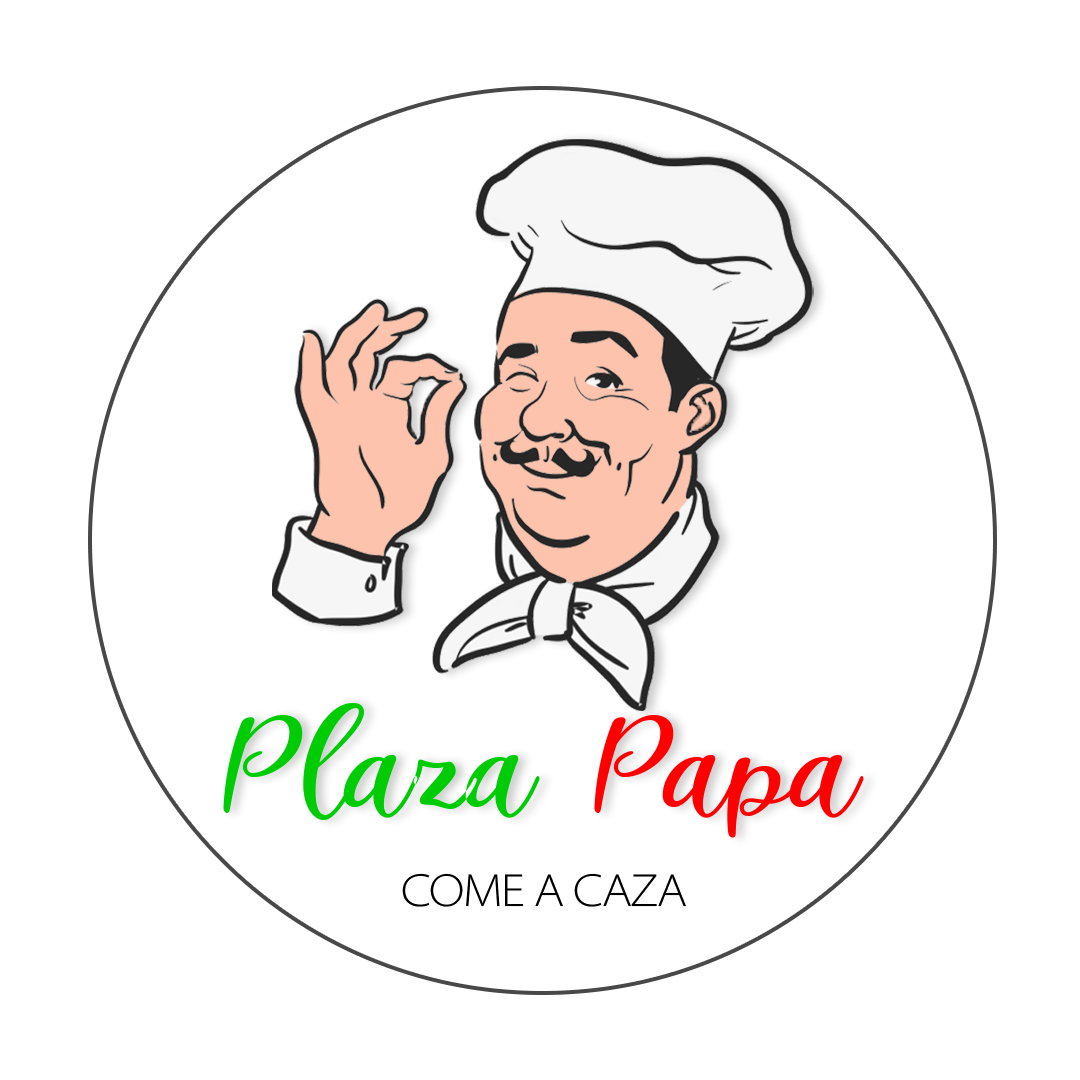
<style>
.page{position:relative;width:1080px;height:1080px;background:#ffffff}
.page>*{position:absolute;margin:0}
.t1{font:183.5px "ItalianBreakfast-Regular";color:#00cc05}
.t2{font:183.5px "ItalianBreakfast-Regular";color:#ff0000}
.t3{font:46.7px "MyriadConceptRoman-LightSemiExtended";letter-spacing:-0.025em;color:#000000}
</style>
<div class="page">
<p class="t1" style="left:223px;top:703px;width:641px;height:135px">Plaza <span class="t2">Papa</span></p>
<p class="t3" style="left:402px;top:873px;width:284px;height:34px">COME A CAZA</p>
</div>
